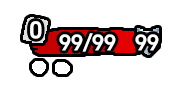
<style>
.page{position:relative;width:175px;height:89px;background:#ffffff}
.page>*{position:absolute;margin:0}
.t1{font:23.2px "DOUYINSANSBOLD-GB";color:#ffffff;text-transform:uppercase}
.t2{font:21.6px "DOUYINSANSBOLD-GB";color:#ffffff;text-transform:uppercase}
</style>
<div class="page">
<p class="t1" style="left:30px;top:21px;width:12px;height:18px">0</p>
<p class="t2" style="left:59px;top:33px;width:57px;height:19px">99/99</p>
<p class="t2" style="left:135px;top:34px;width:24px;height:17px">99</p>
</div>
